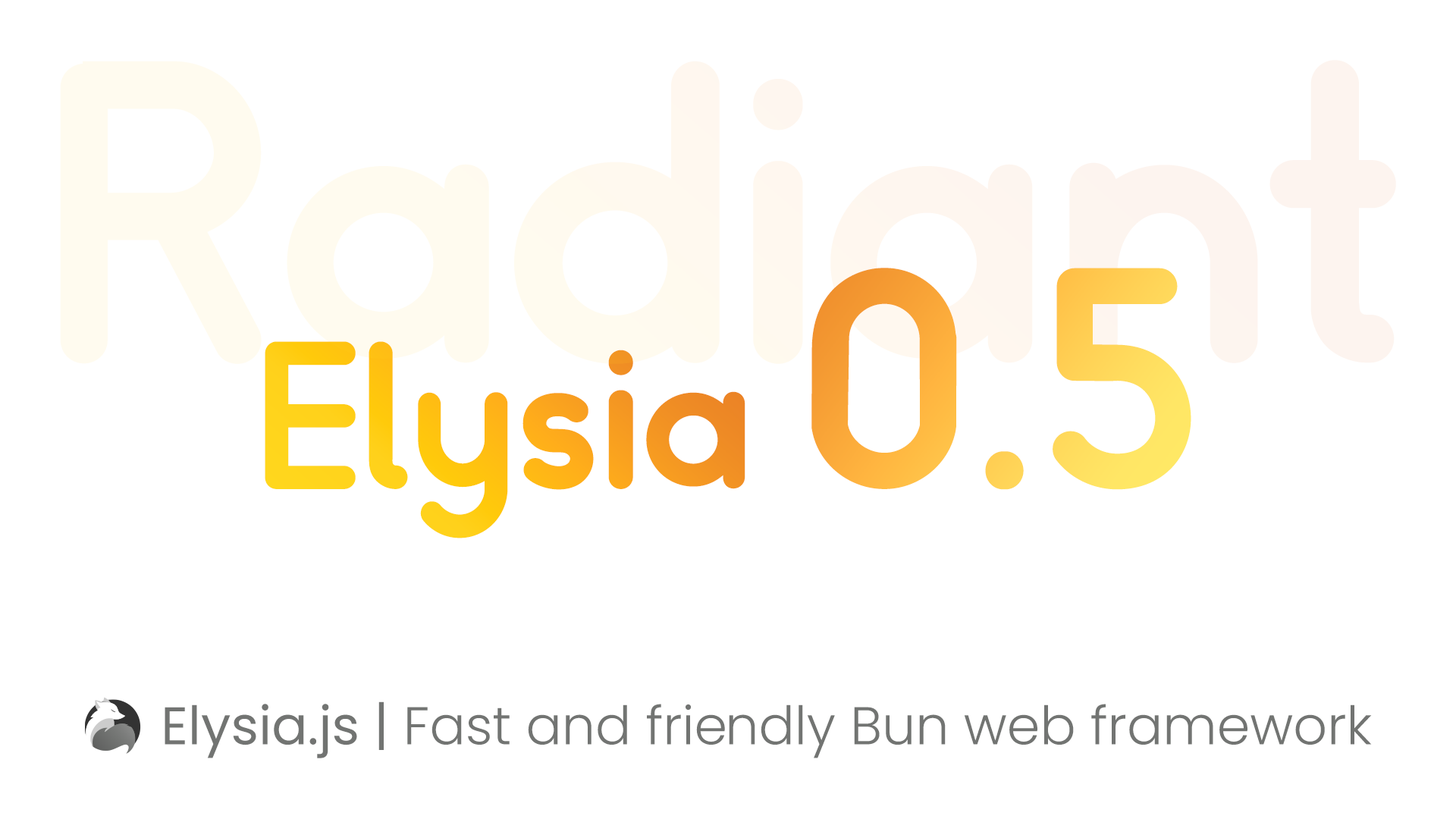
<style>
.page{position:relative;width:1456px;height:819px;background:#ffffff}
.page>*{position:absolute;margin:0}
.t1{font:291.2px "Somatic-Rounded"}
.t2{font:194.1px "Somatic-Rounded"}
.t3{font:53.1px "Poppins-Light";color:#727472}
.t4{font:53.1px "Poppins-Regular";color:#727472}
</style>
<div class="page">
<p class="t1" style="left:811px;top:268px;width:380px;height:222px">0.5</p>
<p class="t2" style="left:265px;top:341px;width:480px;height:197px">Elysia</p>
<p class="t3" style="left:165px;top:701px;width:1207px;height:57px"><span class="t4">Elysia.js | </span>Fast and friendly Bun web framework</p>
</div>
